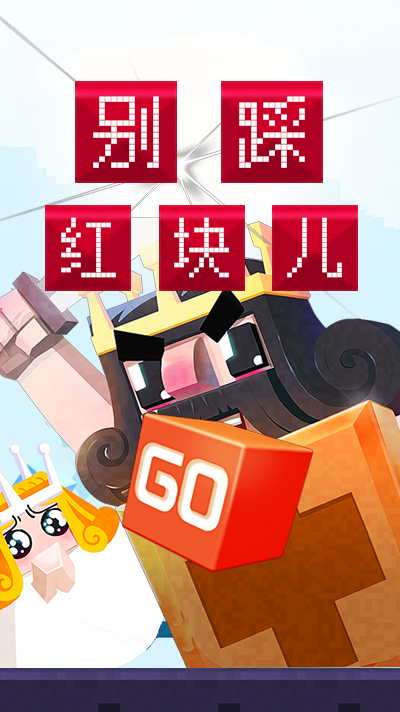
<style>
.page{position:relative;width:400px;height:712px}
.page>*{position:absolute;margin:0}
.t1{font:72px "FZXS12--GB1-0";letter-spacing:-0.15em;color:#fefefe}
.t2{font:60px "FZXS12--GB1-0";letter-spacing:-0.15em;color:#fefefe}
</style>
<div class="page">
<p class="t1" style="left:93px;top:96px;width:66px;height:72px">别</p>
<p class="t1" style="left:239px;top:96px;width:66px;height:72px">踩</p>
<p class="t2" style="left:61px;top:217px;width:55px;height:61px">红</p>
<p class="t2" style="left:174px;top:217px;width:55px;height:61px">块</p>
<p class="t2" style="left:287px;top:217px;width:55px;height:61px">儿</p>
</div>
